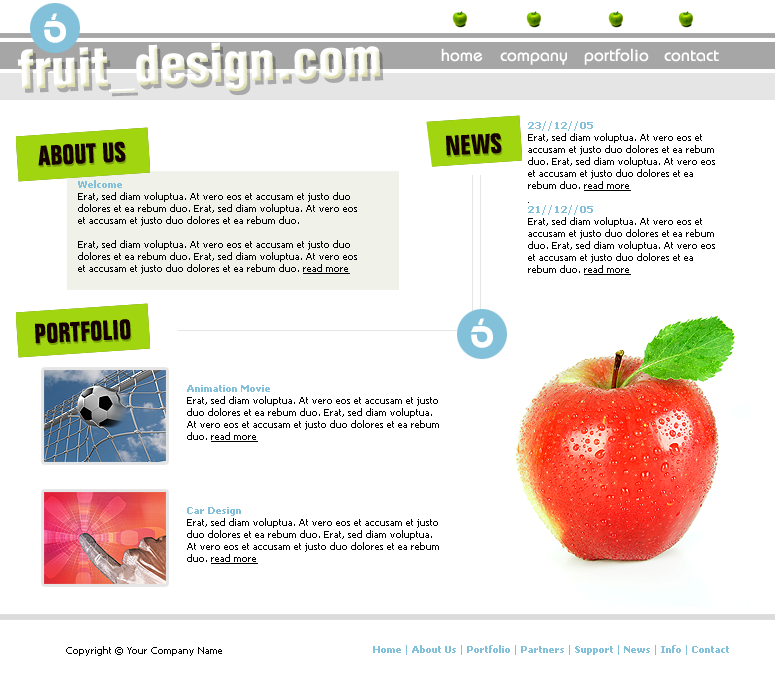
<style>
.page{position:relative;width:775px;height:680px;background:#ffffff}
.page>*{position:absolute;margin:0}
.t1{font:52px "Helvetica-Condensed-Black";color:#ffffff}
.t2{font:18px "Opal";color:#ffffff}
.t3{font:10px "Tahoma";color:#000000}
.t4{font:10px "Tahoma-Bold";color:#83c1da}
.t5{font:10px "Tahoma";color:#000000;text-decoration:underline}
.t6{font:27px "FolioBT-BoldCondensed";color:#170000;text-transform:uppercase}
.t7{font:10px "Tahoma";color:#83c1da}
</style>
<div class="page">
<p class="t1" style="left:17px;top:42px;width:364px;height:51px;rotate:-2deg">fruit_design.com</p>
<p class="t2" style="left:441px;top:48px;width:42px;height:14px">home</p>
<p class="t2" style="left:500px;top:52px;width:67px;height:13px">company</p>
<p class="t2" style="left:584px;top:48px;width:65px;height:17px">portfolio</p>
<p class="t2" style="left:664px;top:50px;width:55px;height:12px">contact</p>
<p class="t3" style="left:528px;top:121px;width:187px;height:154px"><span class="t4">23//12//05<br></span>Erat, sed diam voluptua. At vero eos et accusam et justo duo dolores et ea rebum duo. Erat, sed diam voluptua. At vero eos et accusam et justo duo dolores et ea rebum duo. <span class="t5">read more<br><br></span><span class="t4">21//12//05<br></span>Erat, sed diam voluptua. At vero eos et accusam et justo duo dolores et ea rebum duo. Erat, sed diam voluptua. At vero eos et accusam et justo duo dolores et ea rebum duo. <span class="t5">read more</span></p>
<p class="t6" style="left:446px;top:133px;width:56px;height:23px;rotate:-3deg">news</p>
<p class="t6" style="left:38px;top:141px;width:88px;height:25px;rotate:-3deg">about us</p>
<p class="t3" style="left:78px;top:180px;width:279px;height:94px"><span class="t4">Welcome<br></span>Erat, sed diam voluptua. At vero eos et accusam et justo duo dolores et ea rebum duo. Erat, sed diam voluptua. At vero eos et accusam et justo duo dolores et ea rebum duo. <br><br>Erat, sed diam voluptua. At vero eos et accusam et justo duo dolores et ea rebum duo. Erat, sed diam voluptua. At vero eos et accusam et justo duo dolores et ea rebum duo. <span class="t5">read more</span></p>
<p class="t6" style="left:35px;top:319px;width:96px;height:25px;rotate:-3deg">portfolio</p>
<p class="t3" style="left:187px;top:385px;width:252px;height:57px"><span class="t4">Animation Movie<br></span>Erat, sed diam voluptua. At vero eos et accusam et justo duo dolores et ea rebum duo. Erat, sed diam voluptua. At vero eos et accusam et justo duo dolores et ea rebum duo. <span class="t5">read more</span></p>
<p class="t3" style="left:187px;top:507px;width:252px;height:57px"><span class="t4">Car Design<br></span>Erat, sed diam voluptua. At vero eos et accusam et justo duo dolores et ea rebum duo. Erat, sed diam voluptua. At vero eos et accusam et justo duo dolores et ea rebum duo. <span class="t5">read more</span></p>
<p class="t3" style="left:66px;top:646px;width:156px;height:10px">Copyright © Your Company Name</p>
<p class="t4" style="left:373px;top:645px;width:356px;height:10px"><span class="t7">  </span>Home<span class="t7"> | </span>About Us <span class="t7">| </span>Portfolio <span class="t7">| </span>Partners <span class="t7">| </span>Support <span class="t7">| </span>News<span class="t7"> | </span>Info<span class="t7"> | </span>Contact</p>
</div>
